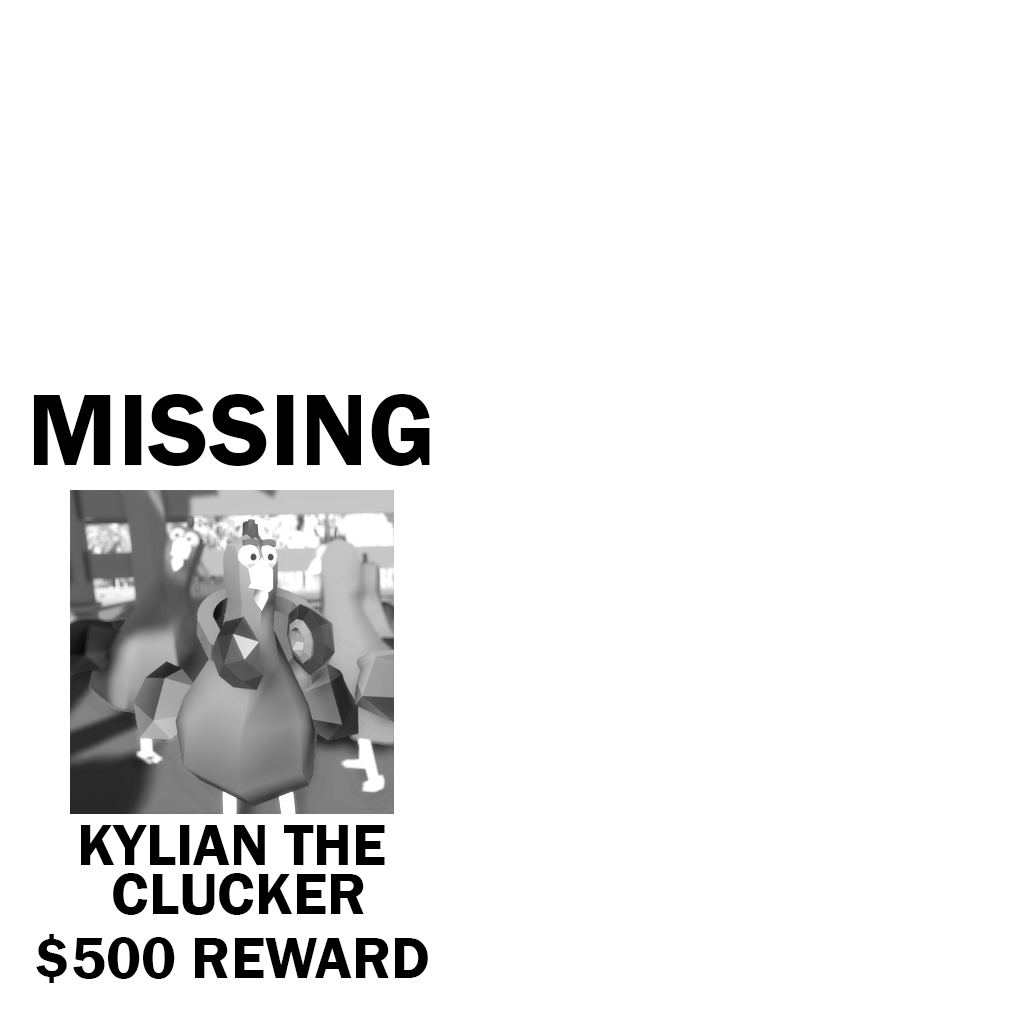
<style>
.page{position:relative;width:1024px;height:1024px;background:#ffffff}
.page>*{position:absolute;margin:0}
.t1{font:105px "FranklinGothic-Demi";color:#000000}
.t2{font:60px/49px "FranklinGothic-Demi";color:#000000}
.t3{font:60px "FranklinGothic-Demi";color:#000000}
</style>
<div class="page">
<p class="t1" style="left:33px;top:394px;width:397px;height:72px">MISSING</p>
<p class="t2" style="left:81px;top:825px;width:304px;height:90px;text-align:center">KYLIAN THE <br>CLUCKER</p>
<p class="t3" style="left:36px;top:934px;width:392px;height:49px">$500 REWARD</p>
</div>
